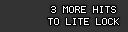
<style>
.page{position:relative;width:128px;height:32px;background:#333333}
.page>*{position:absolute;margin:0}
.t1{font:8px/12px "Terminal";color:#ffffff}
</style>
<div class="page">
<p class="t1" style="left:48px;top:6px;width:71px;height:19px;text-align:center">3 MORE HITS<br>TO LITE LOCK</p>
</div>
